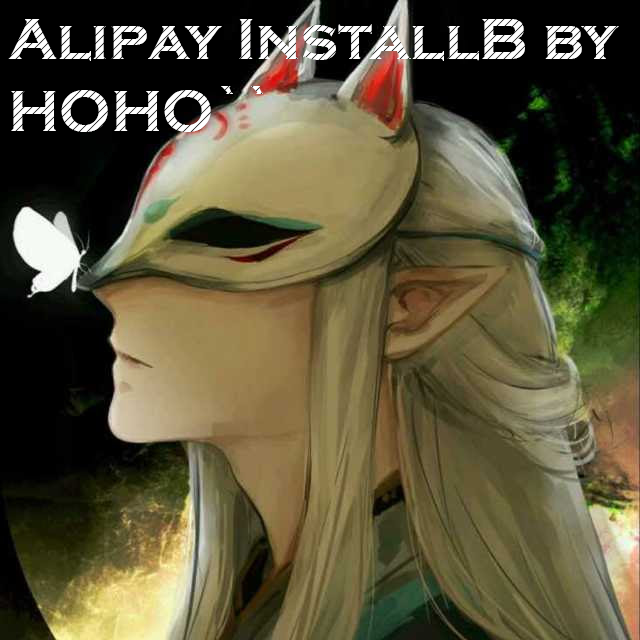
<style>
.page{position:relative;width:640px;height:640px}
.page>*{position:absolute;margin:0}
.t1{font:60px "CopperplateGothic-Bold";color:#ffffff}
</style>
<div class="page">
<p class="t1" style="left:8px;top:19px;width:611px;height:113px">Alipay InstallB by<br>HOHO``</p>
</div>
